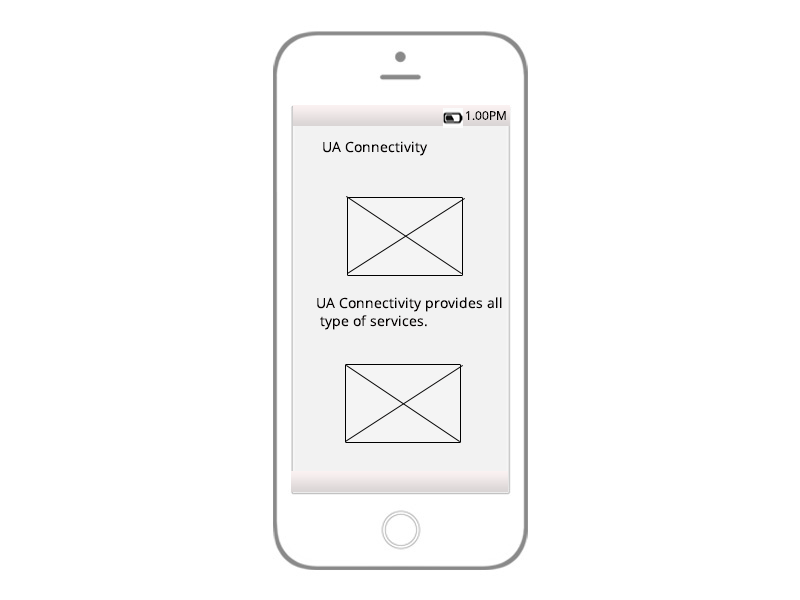
<style>
.page{position:relative;width:800px;height:600px;background:#ffffff}
.page>*{position:absolute;margin:0}
.t1{font:12px "OpenSans";color:#020000}
.t2{font:14px "LatinWide";color:#f80b0b}
.t3{font:14px "OpenSans";color:#030000}
.t4{font:14px/6px "OpenSans";color:#030000}
</style>
<div class="page">
<p class="t1" style="left:466px;top:111px;width:40px;height:9px"><span class="t2">      <br>                                                  </span>1.00PM</p>
<p class="t3" style="left:323px;top:141px;width:105px;height:15px">UA Connectivity</p>
<p class="t4" style="left:317px;top:297px;width:185px;height:33px">UA Connectivity provides all<br><br><br> type of services.</p>
</div>
